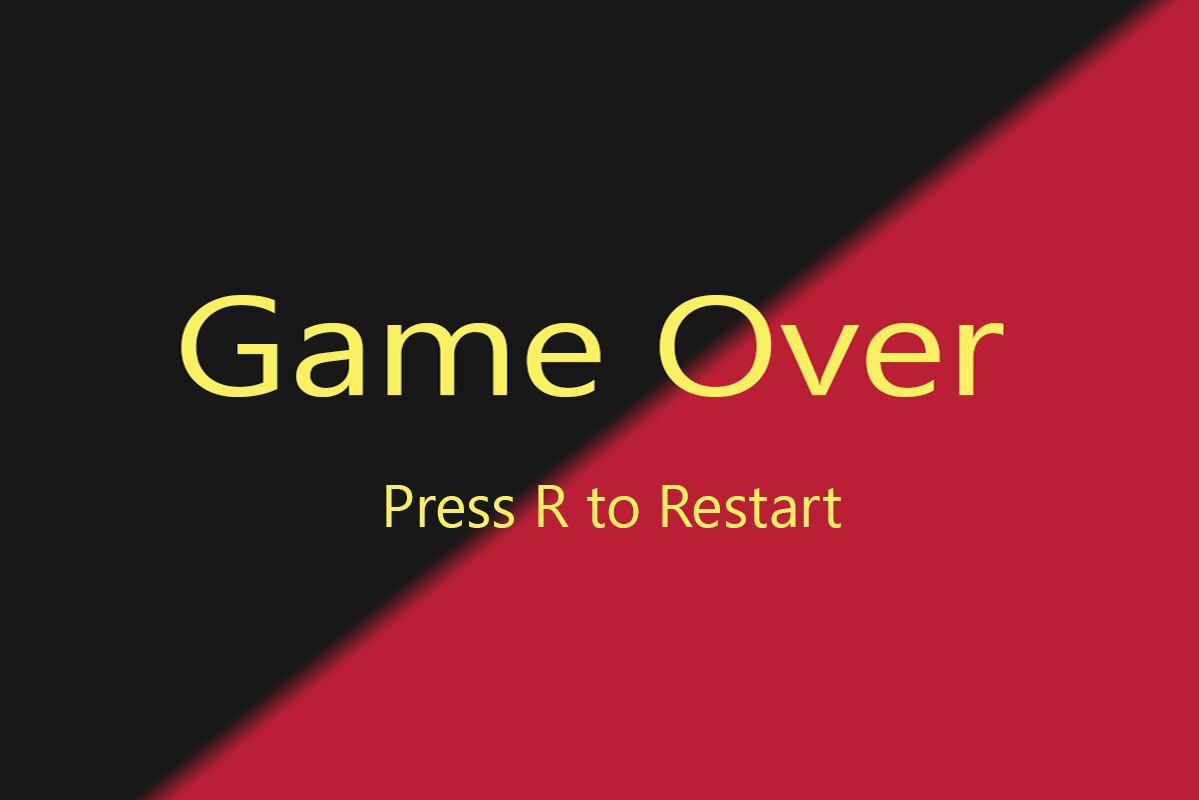
<style>
.page{position:relative;width:1199px;height:800px;background:#181818}
.page>*{position:absolute;margin:0}
.t1{font:60px "Leelawadee";color:#f8ef62}
</style>
<div class="page">
<p class="t1" style="left:386px;top:485px;width:455px;height:43px">Press R to Restart</p>
</div>
